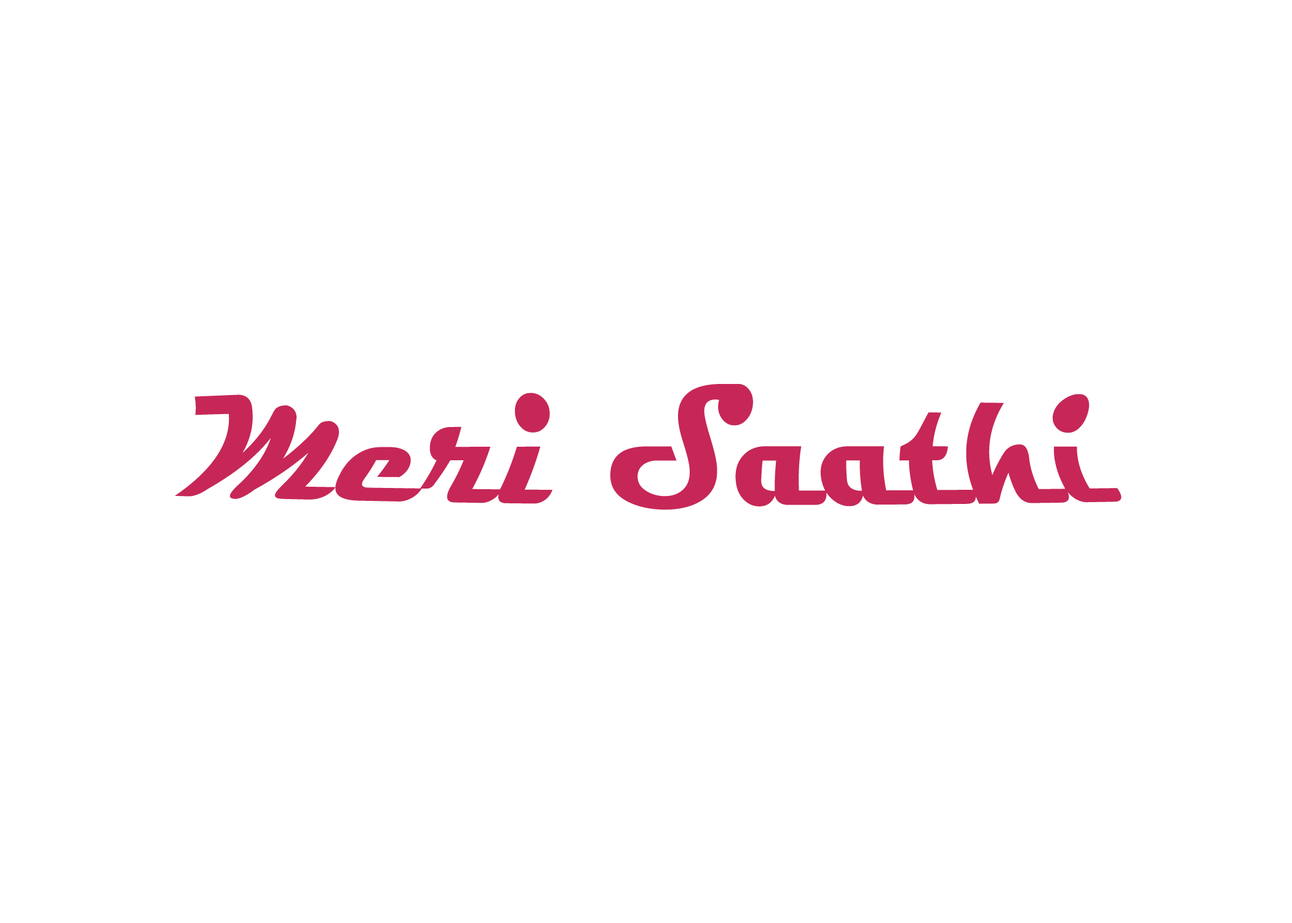
<style>
.page{position:relative;width:1292px;height:923px;background:#ffffff}
.page>*{position:absolute;margin:0}
.t1{font:153.8px "Magneto-Bold";color:#c62757}
</style>
<div class="page">
<p class="t1" style="left:175px;top:384px;width:947px;height:126px">Meri Saathi</p>
</div>
